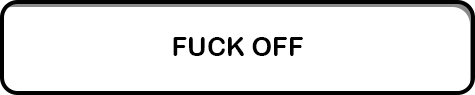
<style>
.page{position:relative;width:475px;height:95px;background:#ffffff}
.page>*{position:absolute;margin:0}
.t1{font:26px "ArialRoundedMTBold";letter-spacing:0.01em;color:#000000}
</style>
<div class="page">
<p class="t1" style="left:173px;top:37px;width:130px;height:19px">FUCK OFF</p>
</div>
